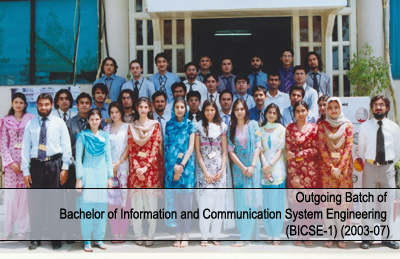
<style>
.page{position:relative;width:400px;height:259px}
.page>*{position:absolute;margin:0}
.t1{font:13.9px "ArialNarrow";color:#000000}
</style>
<div class="page">
<p class="t1" style="left:60px;top:191px;width:330px;height:48px;text-align:right">Outgoing Batch of <br>Bachelor of Information and Communication System Engineering <br>(BICSE-1) (2003-07)</p>
</div>
